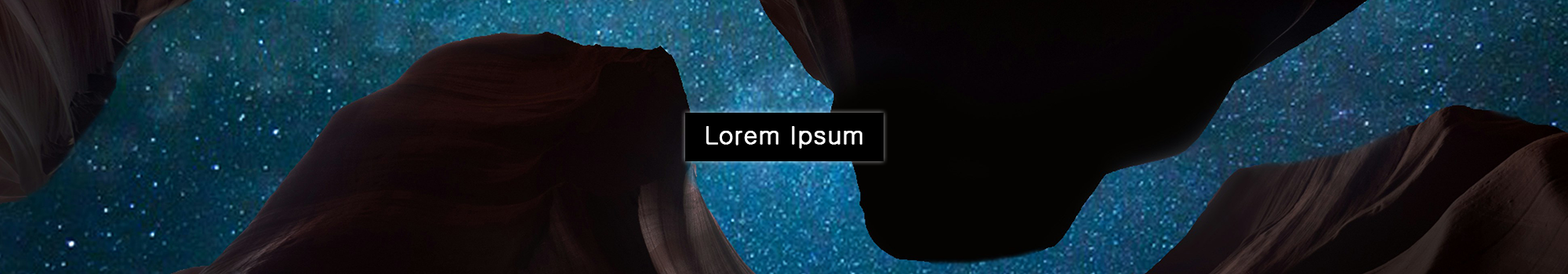
<style>
.page{position:relative;width:1568px;height:274px}
.page>*{position:absolute;margin:0}
.t1{font:25.1px "Gulim";letter-spacing:0.004em;color:#ffffff;font-weight:bold}
</style>
<div class="page">
<p class="t1" style="left:706px;top:126px;width:156px;height:23px">Lorem Ipsum</p>
</div>
